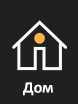
<style>
.page{position:relative;width:78px;height:104px;background:#202020}
.page>*{position:absolute;margin:0}
.t1{font:12px "Calibri-Bold";color:#ffffff}
</style>
<div class="page">
<p class="t1" style="left:23px;top:82px;width:30px;height:14px">Дом</p>
</div>
